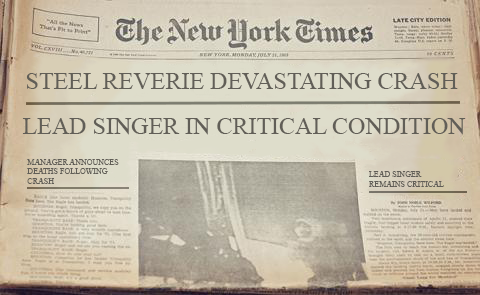
<style>
.page{position:relative;width:480px;height:295px}
.page>*{position:absolute;margin:0}
.t1{font:24px "TimesNewRomanPSMT";color:#615e57}
.t2{font:8px "TimesNewRomanPSMT";color:#615e57}
</style>
<div class="page">
<p class="t1" style="left:26px;top:73px;width:432px;height:17px">STEEL REVERIE DEVASTATING CRASH</p>
<p class="t1" style="left:22px;top:118px;width:444px;height:17px">LEAD SINGER IN CRITICAL CONDITION</p>
<p class="t2" style="left:27px;top:159px;width:92px;height:25px">MANAGER ANNOUNCES <br>DEATHS FOLLOWING <br>CRASH</p>
<p class="t2" style="left:369px;top:171px;width:75px;height:16px">LEAD SINGER <br>REMAINS CRITICAL</p>
</div>
